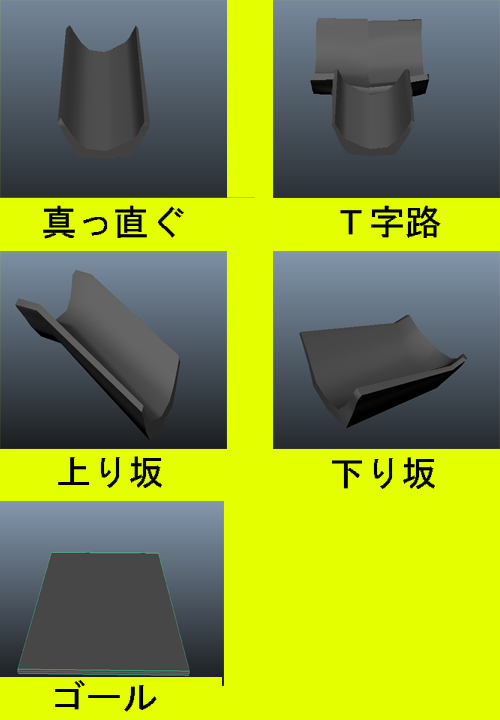
<style>
.page{position:relative;width:500px;height:720px;background:#e4ff00}
.page>*{position:absolute;margin:0}
.t1{font:48px "System";color:#010101}
</style>
<div class="page">
<p class="t1" style="left:43px;top:205px;width:141px;height:34px">真っ直ぐ</p>
<p class="t1" style="left:340px;top:205px;width:101px;height:33px">Ｔ字路</p>
<p class="t1" style="left:58px;top:456px;width:104px;height:32px">上り坂</p>
<p class="t1" style="left:331px;top:457px;width:104px;height:32px">下り坂</p>
<p class="t1" style="left:55px;top:680px;width:102px;height:32px">ゴール</p>
</div>
